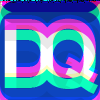
<style>
.page{position:relative;width:100px;height:100px}
.page>*{position:absolute;margin:0}
.t1{font:80px "Arial-BoldMT"}
</style>
<div class="page">
<p class="t1" style="left:40px;top:17px;width:58px;height:65px">Q</p>
<p class="t1" style="left:4px;top:18px;width:49px;height:58px">D</p>
</div>
